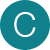
<style>
.page{position:relative;width:50px;height:50px;background:#0f808c}
.page>*{position:absolute;margin:0}
.t1{font:33.3px "HelveticaNeue-Light";color:#ffffff}
</style>
<div class="page">
<p class="t1" style="left:14px;top:12px;width:22px;height:25px">C</p>
</div>
